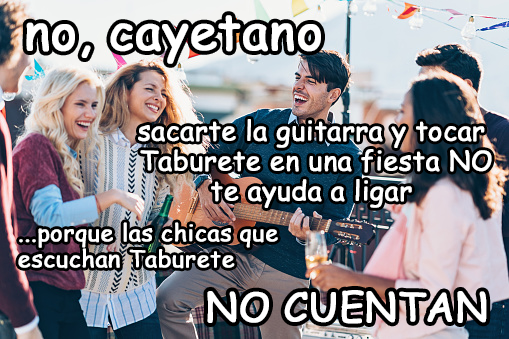
<style>
.page{position:relative;width:509px;height:339px}
.page>*{position:absolute;margin:0}
.t1{font:49.4px "ComicSansMS";color:#ffffff;font-weight:bold}
.t2{font:26.7px "ComicSansMS";color:#ffffff;font-weight:bold}
.t3{font:23.4px "ComicSansMS";color:#ffffff;font-weight:bold}
.t4{font:39.6px "ComicSansMS";color:#ffffff;font-weight:bold}
</style>
<div class="page">
<p class="t1" style="left:26px;top:15px;width:295px;height:49px">no, cayetano</p>
<p class="t2" style="left:138px;top:119px;width:354px;height:89px;text-align:center">sacarte la guitarra y tocar<br> Taburete en una fiesta NO<br>te ayuda a ligar</p>
<p class="t3" style="left:18px;top:222px;width:260px;height:47px">...porque las chicas que<br>escuchan Taburete</p>
<p class="t4" style="left:207px;top:290px;width:280px;height:34px">NO CUENTAN</p>
</div>
